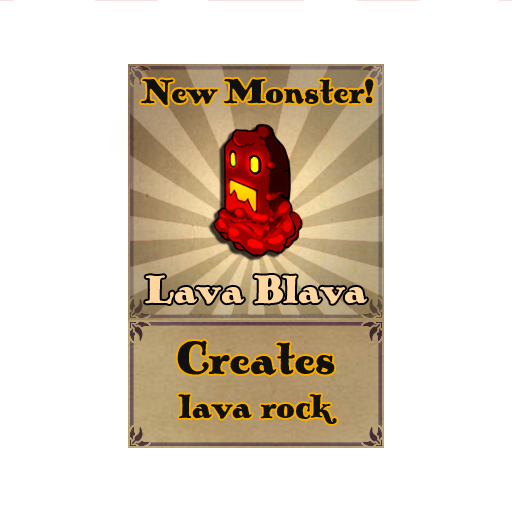
<style>
.page{position:relative;width:512px;height:512px;background:#ffffff}
.page>*{position:absolute;margin:0}
.t1{font:36px "PickworthOldStylePro";color:#101010}
.t2{font:42px "PickworthOldStylePro";color:#ffd6a0}
.t3{font:48px "PickworthOldStylePro";color:#101010}
</style>
<div class="page">
<p class="t1" style="left:141px;top:78px;width:233px;height:27px">New Monster!</p>
<p class="t2" style="left:145px;top:275px;width:222px;height:29px">Lava Blava</p>
<p class="t1" style="left:177px;top:340px;width:160px;height:84px;text-align:center"><span class="t3">Creates <br></span>lava rock</p>
</div>
